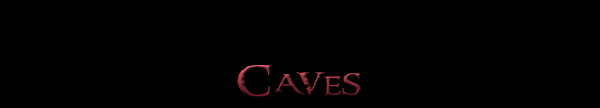
<style>
.page{position:relative;width:600px;height:108px;background:#000000}
.page>*{position:absolute;margin:0}
.t1{font:31.1px "RingbearerMedium";letter-spacing:0.04em;font-variant:small-caps;scale:1.55 1}
</style>
<div class="page">
<p class="t1" style="left:237px;top:65px;width:124px;height:33px">Caves</p>
<p class="t1" style="left:237px;top:65px;width:124px;height:33px">Caves</p>
</div>
